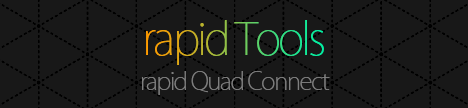
<style>
.page{position:relative;width:468px;height:108px;background:#181818}
.page>*{position:absolute;margin:0}
.t1{font:44.1px "KozGoPr6N-ExtraLight";letter-spacing:-0.06em}
.t2{font:24.1px "KozGoPr6N-ExtraLight";letter-spacing:-0.06em;color:#7f7f7f}
</style>
<div class="page">
<p class="t1" style="left:146px;top:20px;width:178px;height:45px">rapid Tools</p>
<p class="t2" style="left:141px;top:71px;width:189px;height:24px">rapid Quad Connect</p>
</div>
